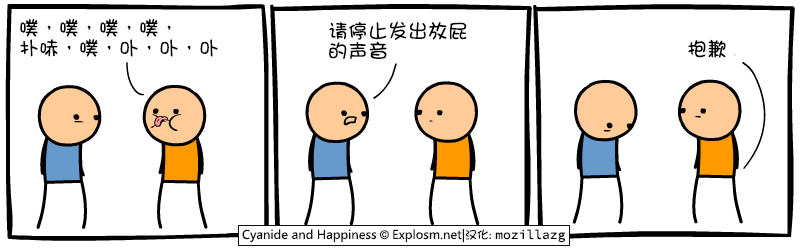
<style>
.page{position:relative;width:800px;height:250px;background:#ffffff}
.page>*{position:absolute;margin:0}
.t1{font:20px/20px "DFGirl";color:#000000}
.t2{font:20px "DFGirl";color:#000000}
</style>
<div class="page">
<p class="t1" style="left:20px;top:19px;width:198px;height:38px">噗，噗，噗，噗，<br>扑哧，噗，卟，卟，卟</p>
<p class="t1" style="left:329px;top:21px;width:138px;height:39px">请停止发出放屁<br>的声音</p>
<p class="t2" style="left:688px;top:39px;width:38px;height:19px">抱歉</p>
</div>
